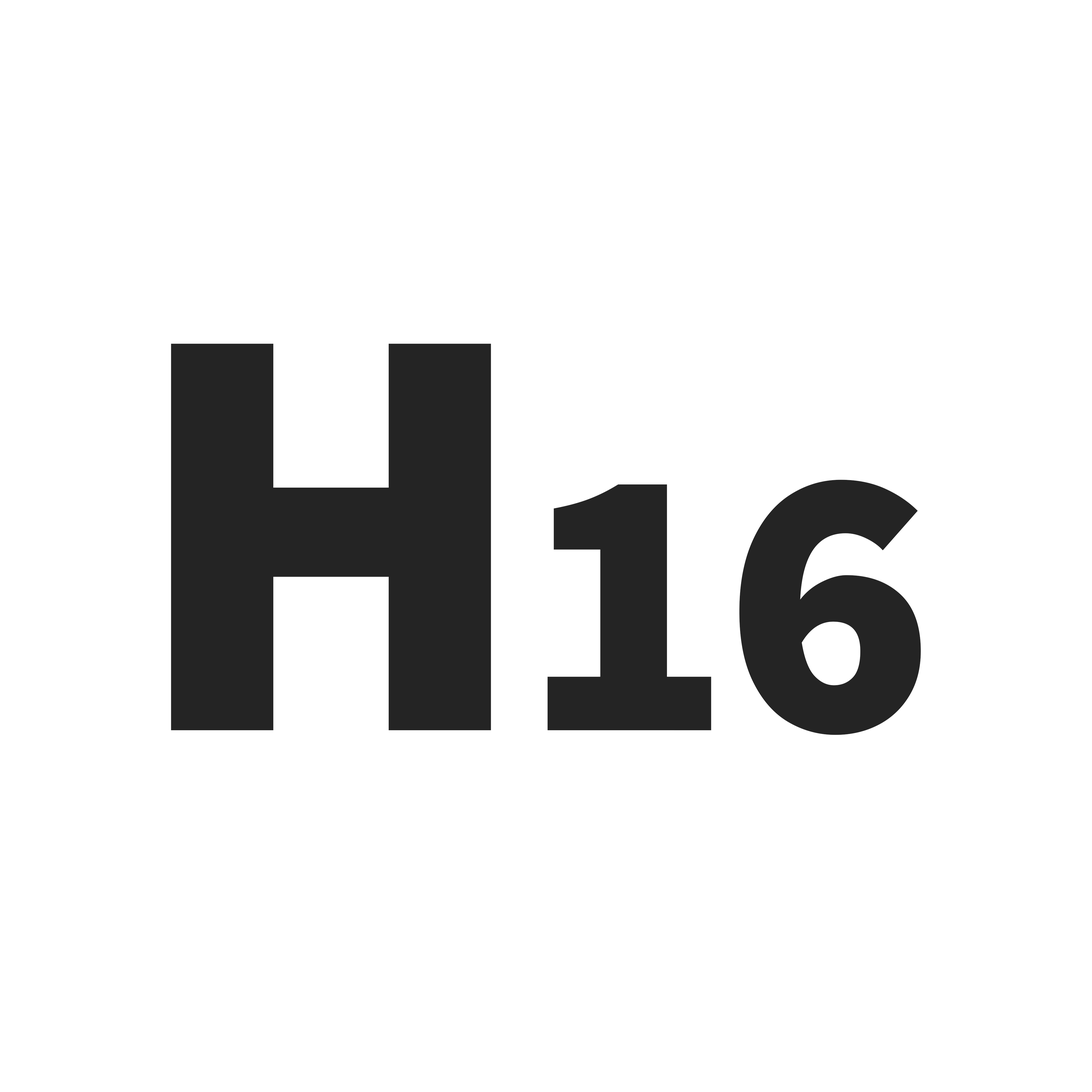
<style>
.page{position:relative;width:1092px;height:1092px;background:#ffffff}
.page>*{position:absolute;margin:0}
.t1{font:387.7px "Assistant-ExtraBold";color:#242424}
.t2{font:594.6px "Assistant-ExtraBold";color:#242424}
</style>
<div class="page">
<p class="t1" style="left:171px;top:344px;width:750px;height:391px"><span class="t2">H</span>16</p>
</div>
